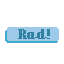
<style>
.page{position:relative;width:64px;height:64px;background:#ffffff}
.page>*{position:absolute;margin:0}
.t1{font:14px "Superscript";color:#3281a2}
</style>
<div class="page">
<p class="t1" style="left:18px;top:29px;width:32px;height:10px">Rad!</p>
</div>
